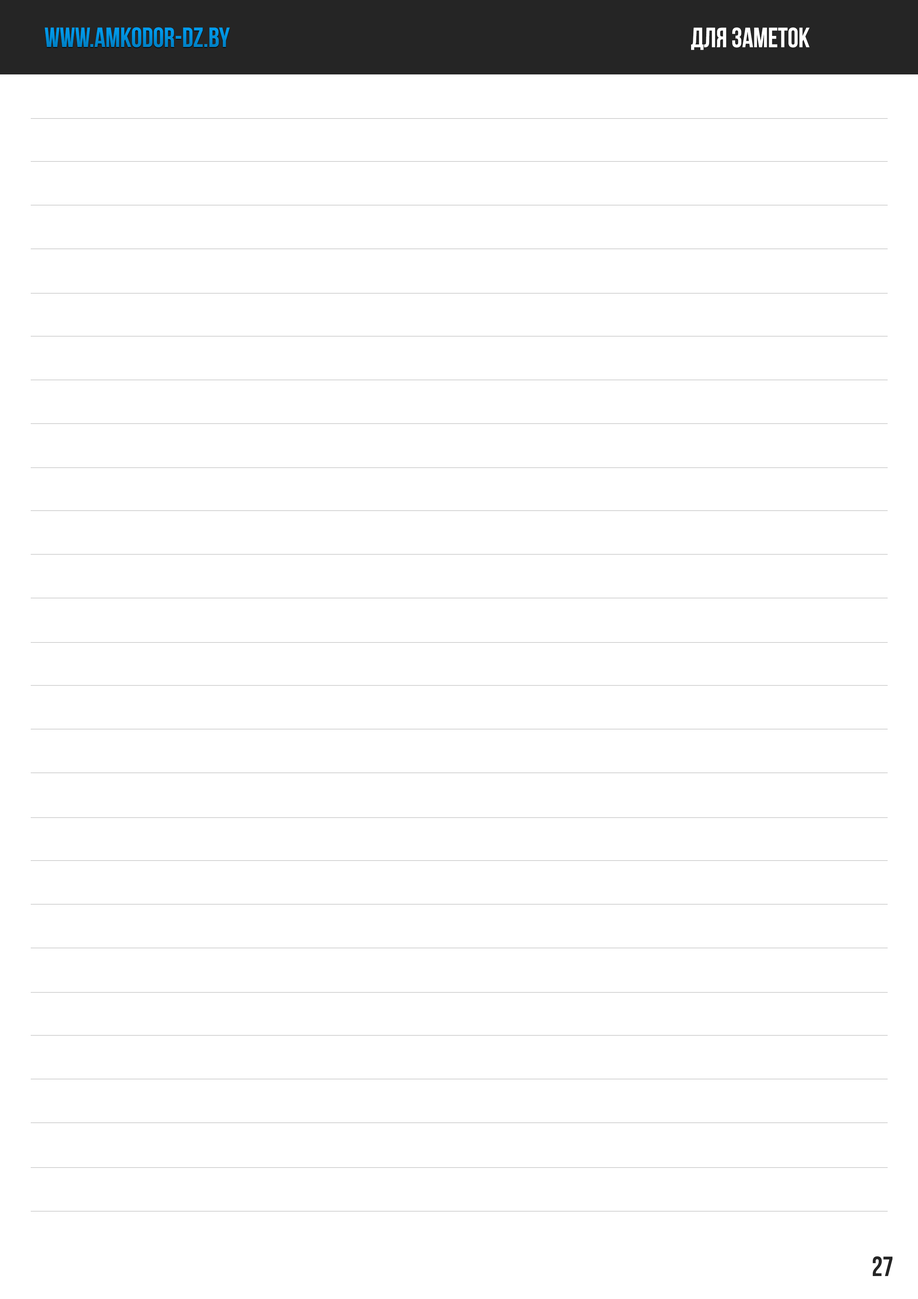
<style>
.page{position:relative;width:918px;height:1299px;background:#ffffff}
.page>*{position:absolute;margin:0}
.t1{font:27.8px "BebasNeueBold";color:#008ed9}
.t2{font:27.8px "BebasNeueBold";color:#ffffff}
.t3{font:27.8px "BebasNeueBold";color:#252525}
</style>
<div class="page">
<p class="t1" style="left:45px;top:27px;width:185px;height:20px">www.amkodor-dz.by</p>
<p class="t2" style="left:691px;top:27px;width:119px;height:23px">для заметок</p>
<p class="t3" style="left:873px;top:1256px;width:20px;height:20px">27</p>
</div>
